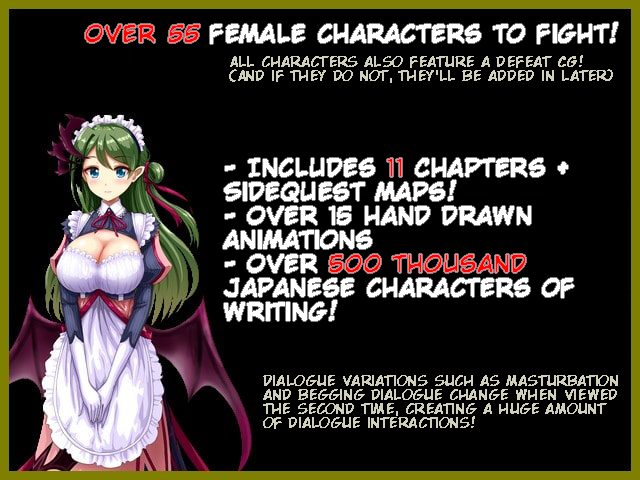
<style>
.page{position:relative;width:640px;height:480px;background:#000000}
.page>*{position:absolute;margin:0}
.t1{font:24px "CCWildWordsRoman";letter-spacing:0.01em;color:#ffffff;font-weight:bold}
.t2{font:24px "CCWildWordsRoman";letter-spacing:0.01em;color:#ff0000;font-weight:bold}
.t3{font:24px "CCWildWordsRoman";letter-spacing:0.01em;color:#ff0000;font-weight:bold;font-style:italic}
.t4{font:14px/14px "CCWildWordsRoman";letter-spacing:0.01em;color:#cfcfbc;font-weight:bold}
.t5{font:24px/24px "CCWildWordsRoman";letter-spacing:0.01em;color:#ffffff;font-weight:bold}
.t6{font:24px/24px "CCWildWordsRoman";letter-spacing:0.01em;color:#ff0000;font-weight:bold}
</style>
<div class="page">
<p class="t1" style="left:85px;top:22px;width:533px;height:22px"><span class="t2">Over </span><span class="t3">55</span> female characters to fight!</p>
<p class="t4" style="left:229px;top:55px;width:384px;height:28px">All characters also feature a defeat CG!<br>(And if they do not, they'll be added in later)</p>
<p class="t5" style="left:223px;top:158px;width:351px;height:163px">- Includes <span class="t6">11</span> Chapters + <br>Sidequest maps!<br>- Over 15 hand drawn<br>animations<br>- Over <span class="t6">500 thousand<br></span>japanese characters of<br>writing!</p>
<p class="t4" style="left:263px;top:375px;width:355px;height:54px">Dialogue variations such as masturbation<br>and begging dialogue change when viewed<br>the second time, creating a huge amount<br>of dialogue interactions!</p>
</div>
